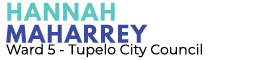
<style>
.page{position:relative;width:270px;height:60px;background:#ffffff}
.page>*{position:absolute;margin:0}
.t1{font:14px "Montserrat-Regular";color:#000000}
</style>
<div class="page">
<p class="t1" style="left:6px;top:43px;width:196px;height:15px">Ward 5 - Tupelo City Council</p>
</div>
